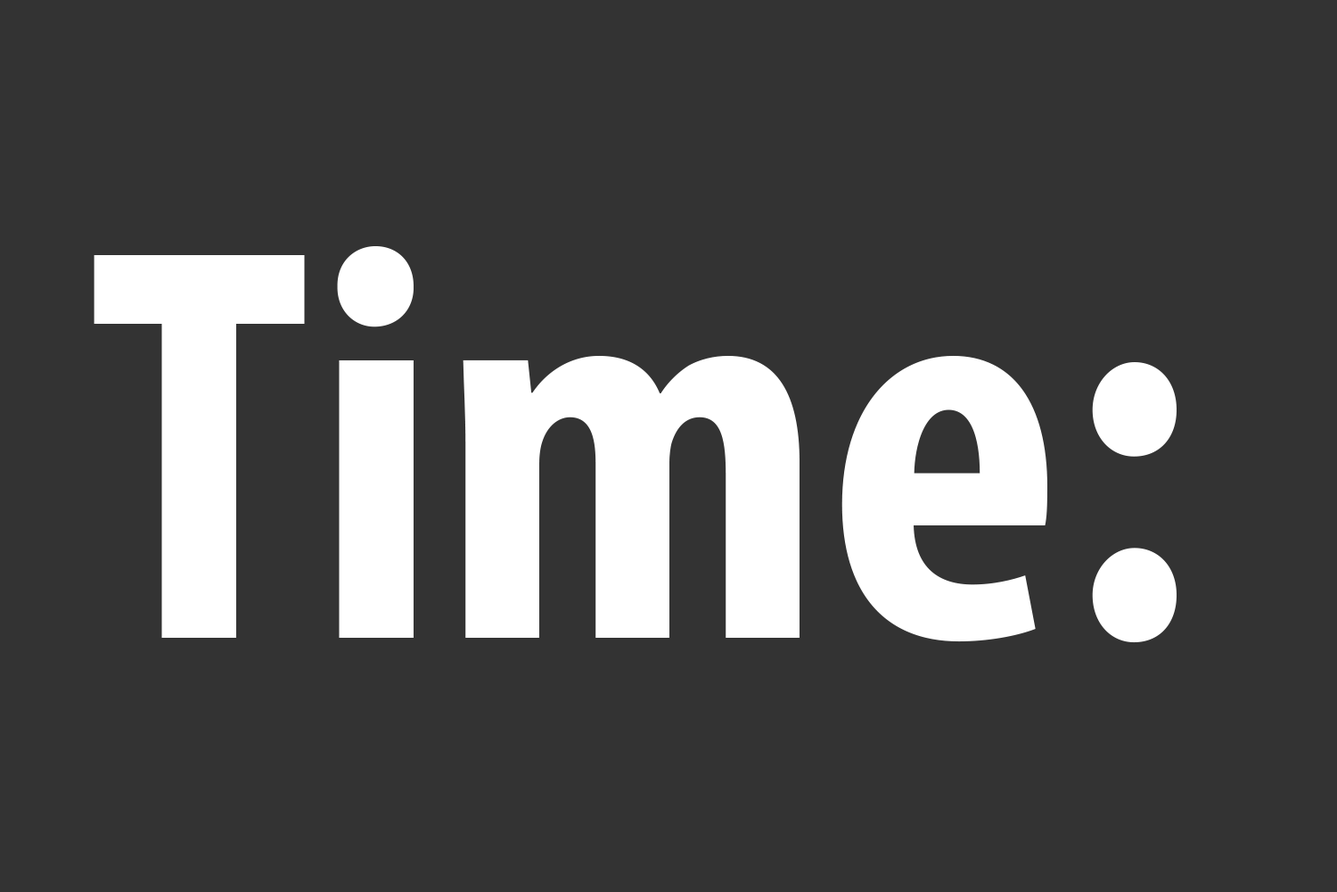
<style>
.page{position:relative;width:1337px;height:892px;background:#333333}
.page>*{position:absolute;margin:0}
.t1{font:567.4px "MyriadPro-BoldCond";color:#ffffff}
</style>
<div class="page">
<p class="t1" style="left:94px;top:246px;width:1083px;height:397px">Time:</p>
</div>
